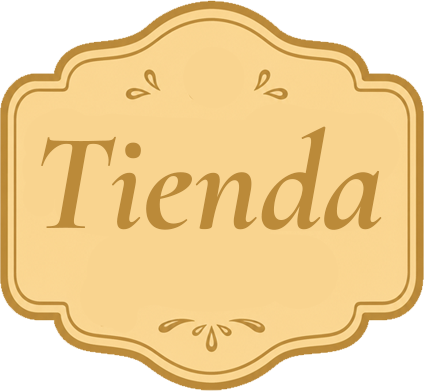
<style>
.page{position:relative;width:424px;height:392px;background:#f9d48f}
.page>*{position:absolute;margin:0}
.t1{font:139.8px "CormorantGaramondItalic-BoldItalic";color:#bb8a39}
</style>
<div class="page">
<p class="t1" style="left:41px;top:126px;width:341px;height:104px">Tienda</p>
</div>
